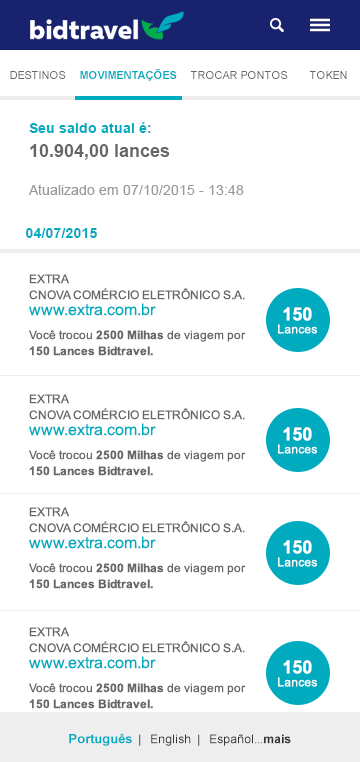
<style>
.page{position:relative;width:360px;height:762px;background:#ffffff}
.page>*{position:absolute;margin:0}
.t1{font:11px "ArialMT";color:#666666;text-transform:uppercase}
.t2{font:11px "Arial-BoldMT";color:#00abbf;text-transform:uppercase}
.t3{font:14px "Arial-BoldMT";color:#00abbf}
.t4{font:18px "Arial-BoldMT";color:#666666}
.t5{font:14px "ArialMT";color:#999999}
.t6{font:12px/16px "ArialMT";color:#666666;text-transform:uppercase}
.t7{font:16px/16px "ArialMT";color:#00abbf}
.t8{font:12px/13px "ArialMT";color:#ffffff}
.t9{font:18px/16px "Arial-BoldMT";color:#ffffff}
.t10{font:12px/16px "Arial-BoldMT";color:#666666}
.t11{font:12px/16px "ArialMT";color:#666666}
.t12{font:12px "ArialMT";color:#333333}
.t13{font:13px "Arial-BoldMT";color:#00abbf}
.t14{font:12px "Arial-BoldMT";color:#333333}
</style>
<div class="page">
<p class="t1" style="left:10px;top:71px;width:56px;height:8px">Destinos</p>
<p class="t2" style="left:80px;top:69px;width:97px;height:12px">Movimentações</p>
<p class="t1" style="left:190px;top:71px;width:98px;height:8px">Trocar Pontos</p>
<p class="t1" style="left:309px;top:71px;width:38px;height:8px">Token</p>
<p class="t3" style="left:29px;top:122px;width:122px;height:11px">Seu saldo atual é:</p>
<p class="t4" style="left:30px;top:144px;width:140px;height:16px">10.904,00 lances</p>
<p class="t5" style="left:29px;top:184px;width:215px;height:11px">Atualizado em 07/10/2015 - 13:48</p>
<p class="t3" style="left:26px;top:228px;width:71px;height:10px">04/07/2015</p>
<p class="t6" style="left:29px;top:274px;width:216px;height:42px">Extra<br>CNOVA Comércio Eletrônico S.A. <span class="t7">www.extra.com.br</span></p>
<p class="t8" style="left:278px;top:307px;width:39px;height:27px;text-align:center"><span class="t9">150<br></span>Lances</p>
<p class="t10" style="left:29px;top:330px;width:217px;height:26px"><span class="t11">Você trocou </span>2500 Milhas<span class="t11"> de viagem por <br></span>150 Lances Bidtravel.</p>
<p class="t6" style="left:29px;top:394px;width:216px;height:42px">Extra<br>CNOVA Comércio Eletrônico S.A. <span class="t7">www.extra.com.br</span></p>
<p class="t8" style="left:278px;top:427px;width:39px;height:27px;text-align:center"><span class="t9">150<br></span>Lances</p>
<p class="t10" style="left:29px;top:450px;width:217px;height:26px"><span class="t11">Você trocou </span>2500 Milhas<span class="t11"> de viagem por <br></span>150 Lances Bidtravel.</p>
<p class="t6" style="left:29px;top:507px;width:216px;height:42px">Extra<br>CNOVA Comércio Eletrônico S.A. <span class="t7">www.extra.com.br</span></p>
<p class="t8" style="left:278px;top:540px;width:39px;height:27px;text-align:center"><span class="t9">150<br></span>Lances</p>
<p class="t10" style="left:29px;top:563px;width:217px;height:26px"><span class="t11">Você trocou </span>2500 Milhas<span class="t11"> de viagem por <br></span>150 Lances Bidtravel.</p>
<p class="t6" style="left:29px;top:627px;width:216px;height:42px">Extra<br>CNOVA Comércio Eletrônico S.A. <span class="t7">www.extra.com.br</span></p>
<p class="t8" style="left:278px;top:660px;width:39px;height:27px;text-align:center"><span class="t9">150<br></span>Lances</p>
<p class="t10" style="left:29px;top:683px;width:217px;height:26px"><span class="t11">Você trocou </span>2500 Milhas<span class="t11"> de viagem por <br></span>150 Lances Bidtravel.</p>
<p class="t12" style="left:69px;top:733px;width:222px;height:13px"><span class="t13">Português</span>  |   English  |   Español...<span class="t14">mais</span></p>
</div>
